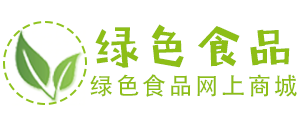
<style>
.page{position:relative;width:300px;height:125px;background:#ffffff}
.page>*{position:absolute;margin:0}
.t1{font:46.4px "AaFangMeng";letter-spacing:0.1em;color:#8dbe16}
.t2{font:24px "AdobeHeitiStd-Regular";letter-spacing:0.1em;color:#8dbe16}
</style>
<div class="page">
<p class="t1" style="left:95px;top:24px;width:195px;height:44px">绿色食品</p>
<p class="t2" style="left:90px;top:74px;width:207px;height:23px">绿色食品网上商城</p>
</div>
